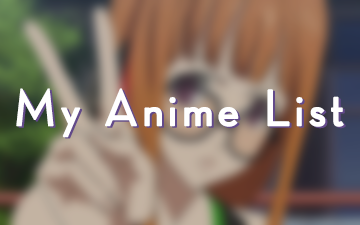
<style>
.page{position:relative;width:360px;height:225px}
.page>*{position:absolute;margin:0}
.t1{font:51.4px "DroidSansFallback";letter-spacing:0.082em;color:#ffffff;font-weight:bold}
.t2{font:51.4px "DroidSansFallback";letter-spacing:0.082em;font-weight:bold}
</style>
<div class="page">
<p class="t1" style="left:16px;top:88px;width:328px;height:50px">My Anime List</p>
<p class="t2" style="left:18px;top:90px;width:328px;height:49px">My Anime List</p>
</div>
